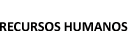
<style>
.page{position:relative;width:128px;height:31px;background:#ffffff}
.page>*{position:absolute;margin:0}
.t1{font:14px "Calibri-Bold";color:#010000}
</style>
<div class="page">
<p class="t1" style="left:0px;top:22px;width:128px;height:10px">RECURSOS HUMANOS</p>
</div>
